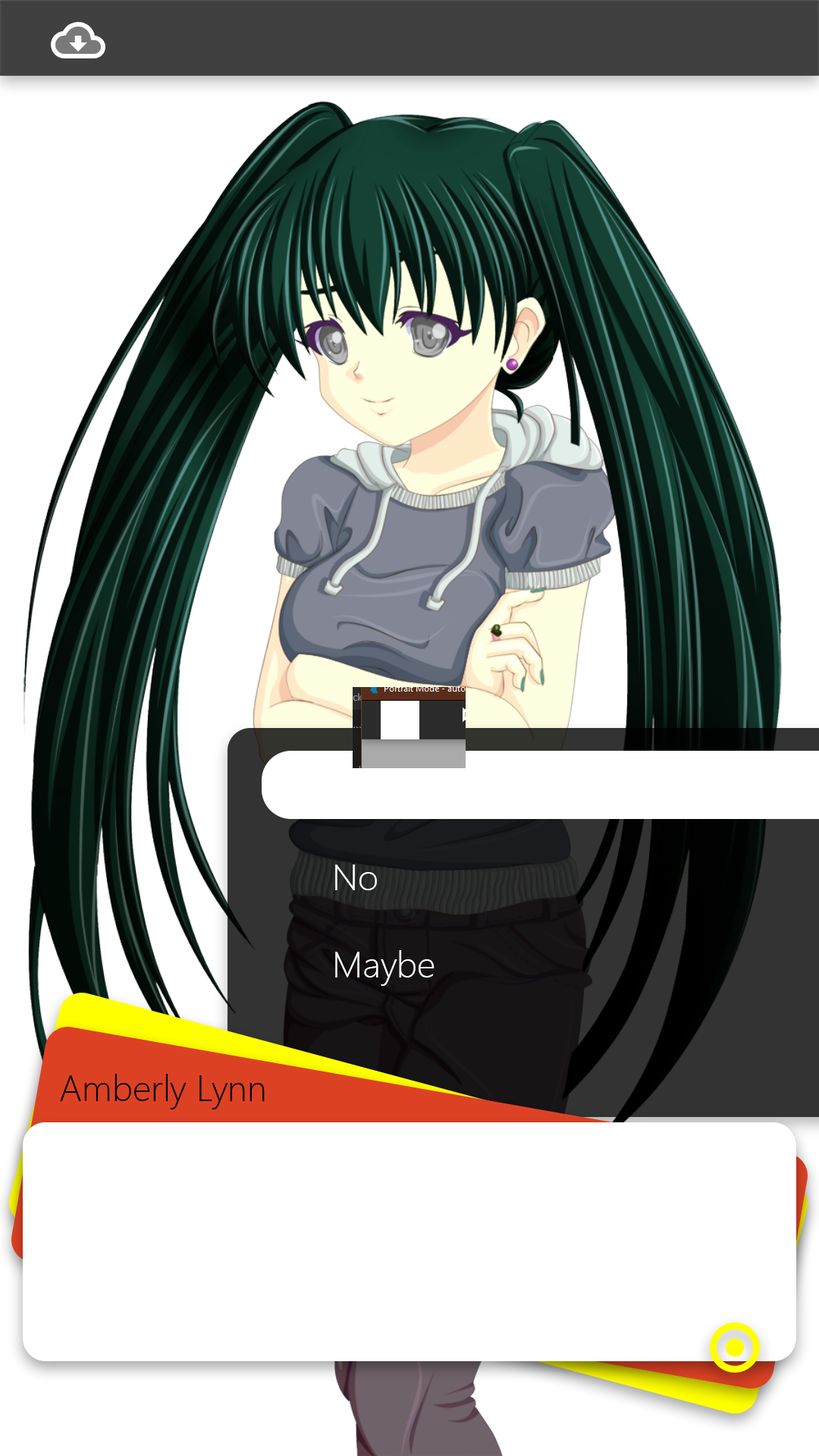
<style>
.page{position:relative;width:819px;height:1456px;background:#ffffff}
.page>*{position:absolute;margin:0}
.t1{font:36.4px "SegoeUI-Light";color:#ffffff}
.t2{font:36.4px "SegoeUI-Light";color:#000000}
</style>
<div class="page">
<p class="t1" style="left:333px;top:777px;width:102px;height:209px">Yes<br><br>No<br><br>Maybe</p>
<p class="t2" style="left:60px;top:1074px;width:205px;height:35px">Amberly Lynn</p>
</div>
